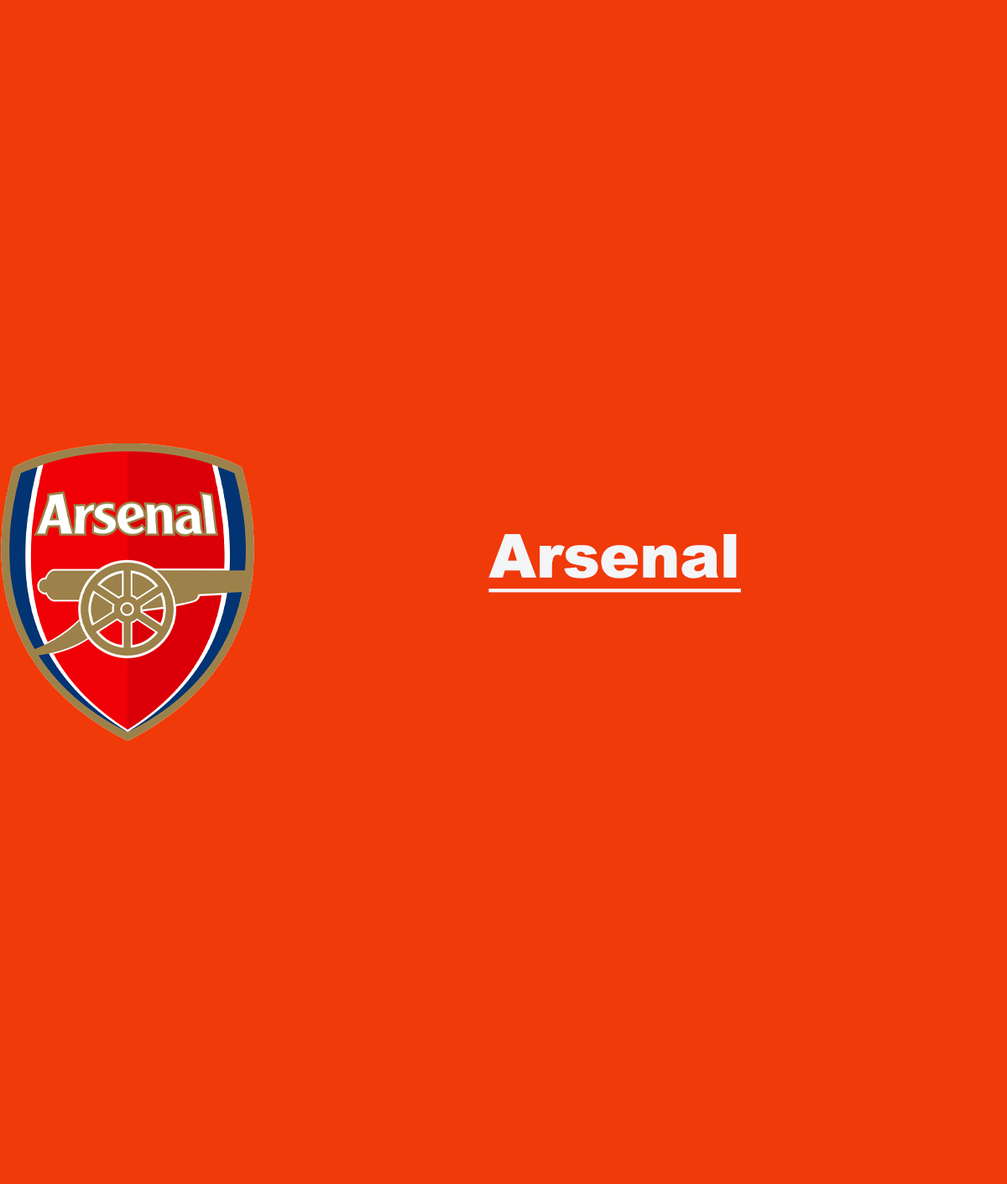
<style>
.page{position:relative;width:1007px;height:1184px;background:#f03a09}
.page>*{position:absolute;margin:0}
.t1{font:60.4px "Arial-Black";letter-spacing:0.01em;color:#f3f5f7;text-decoration:underline}
</style>
<div class="page">
<p class="t1" style="left:489px;top:534px;width:252px;height:59px">Arsenal</p>
</div>
